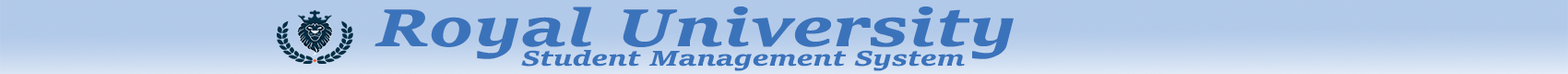
<style>
.page{position:relative;width:1568px;height:74px;background:#b2cae9}
.page>*{position:absolute;margin:0}
.t1{font:55.3px "SitkaSmall-BoldItalic";color:#3b73bb;scale:1.31 1}
.t2{font:22.1px "SitkaSmall-BoldItalic";color:#3b73bb;scale:1.31 1}
</style>
<div class="page">
<p class="t1" style="left:374px;top:6px;width:640px;height:53px">Royal University</p>
<p class="t2" style="left:521px;top:50px;width:444px;height:21px">Student Management System</p>
</div>
